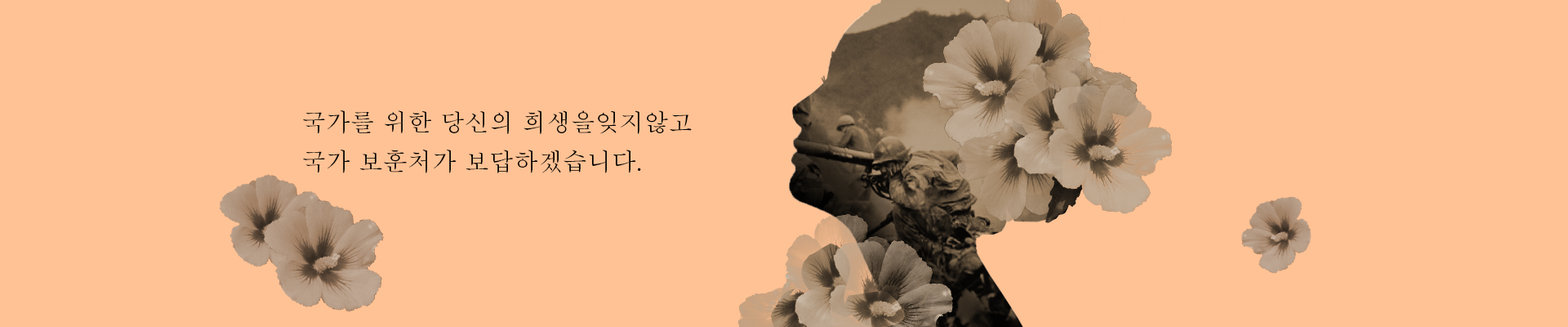
<style>
.page{position:relative;width:1568px;height:327px;background:#ffc295}
.page>*{position:absolute;margin:0}
.t1{font:24.5px/39.2px "AdobeMyungjoStd-Medium";color:#000000}
</style>
<div class="page">
<p class="t1" style="left:303px;top:110px;width:389px;height:63px">국가를 위한 당신의 희생을잊지않고 <br>국가 보훈처가 보답하겠습니다.</p>
</div>
